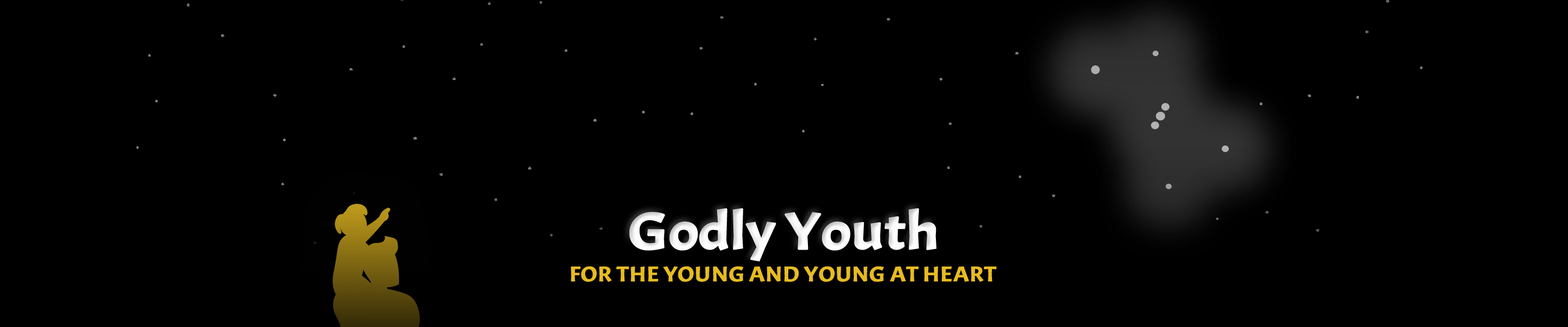
<style>
.page{position:relative;width:1568px;height:327px;background:#000000}
.page>*{position:absolute;margin:0}
.t1{font:51.7px "Acme-Regular";letter-spacing:-0.025em;color:#fdfdfd;font-weight:bold;scale:1.21 1}
.t2{font:21.3px "Acme-Regular";letter-spacing:-0.01em;color:#e7bb21;font-weight:bold;scale:1.16 1}
</style>
<div class="page">
<p class="t1" style="left:629px;top:208px;width:307px;height:53px">Godly Youth</p>
<p class="t2" style="left:571px;top:266px;width:426px;height:15px">FOR THE YOUNG AND YOUNG AT HEART</p>
</div>
